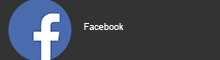
<style>
.page{position:relative;width:220px;height:60px;background:#333333}
.page>*{position:absolute;margin:0}
.t1{font:9px "ArialMT";color:#fefefe}
</style>
<div class="page">
<p class="t1" style="left:84px;top:23px;width:40px;height:7px">Facebook</p>
</div>
